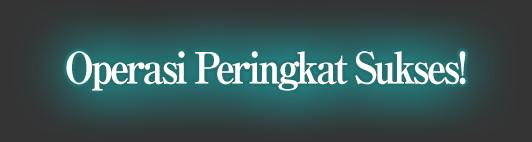
<style>
.page{position:relative;width:532px;height:142px}
.page>*{position:absolute;margin:0}
.t1{font:43px "RyuminPro-ExBold";letter-spacing:-0.08em;color:#ffffff;scale:0.9 1}
</style>
<div class="page">
<p class="t1" style="left:66px;top:51px;width:400px;height:40px">Operasi Peringkat Sukses!</p>
</div>
